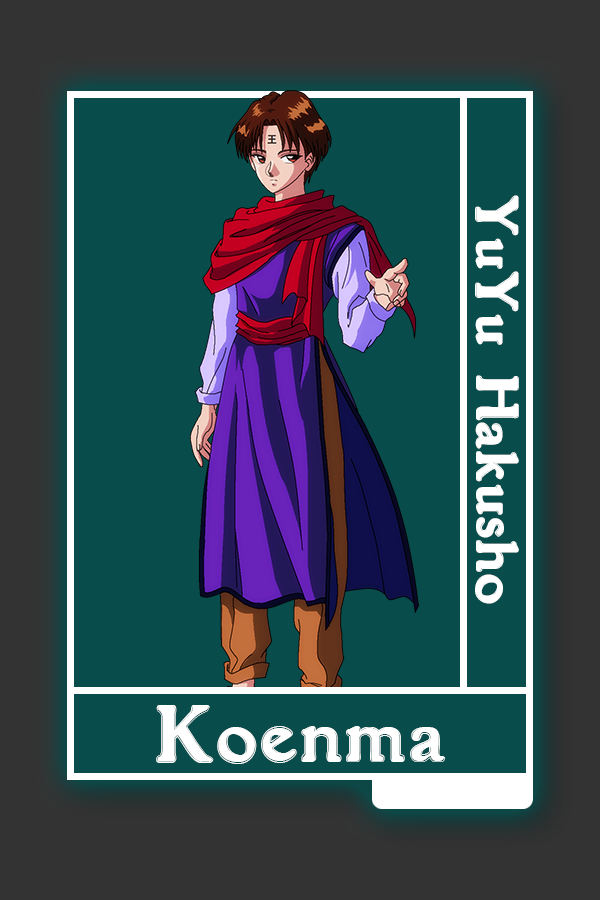
<style>
.page{position:relative;width:600px;height:900px;background:#084d4c}
.page>*{position:absolute;margin:0}
.t1{font:55.2px "GranthamOutline";color:#ffffff}
.t2{font:75px "GranthamOutline";color:#ffffff}
</style>
<div class="page">
<p class="t1" style="left:475px;top:195px;width:44px;height:409px;rotate:90deg">YuYu Hakusho</p>
<p class="t2" style="left:156px;top:705px;width:290px;height:59px">Koenma</p>
</div>
